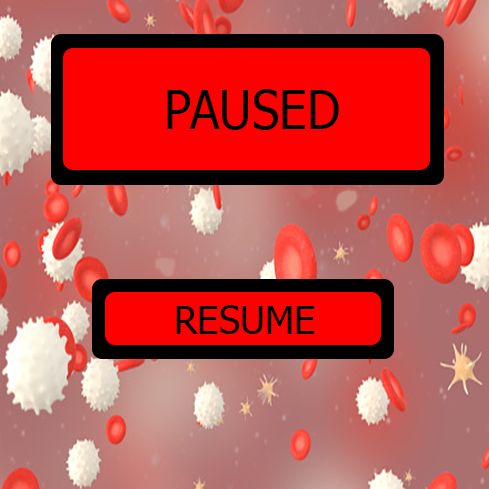
<style>
.page{position:relative;width:489px;height:489px;background:#ff0000}
.page>*{position:absolute;margin:0}
.t1{font:53.4px "Tahoma";color:#000000;scale:0.93 1}
.t2{font:38px "Tahoma";color:#000000}
</style>
<div class="page">
<p class="t1" style="left:167px;top:89px;width:172px;height:41px">PAUSED</p>
<p class="t2" style="left:176px;top:305px;width:139px;height:29px">RESUME</p>
</div>
